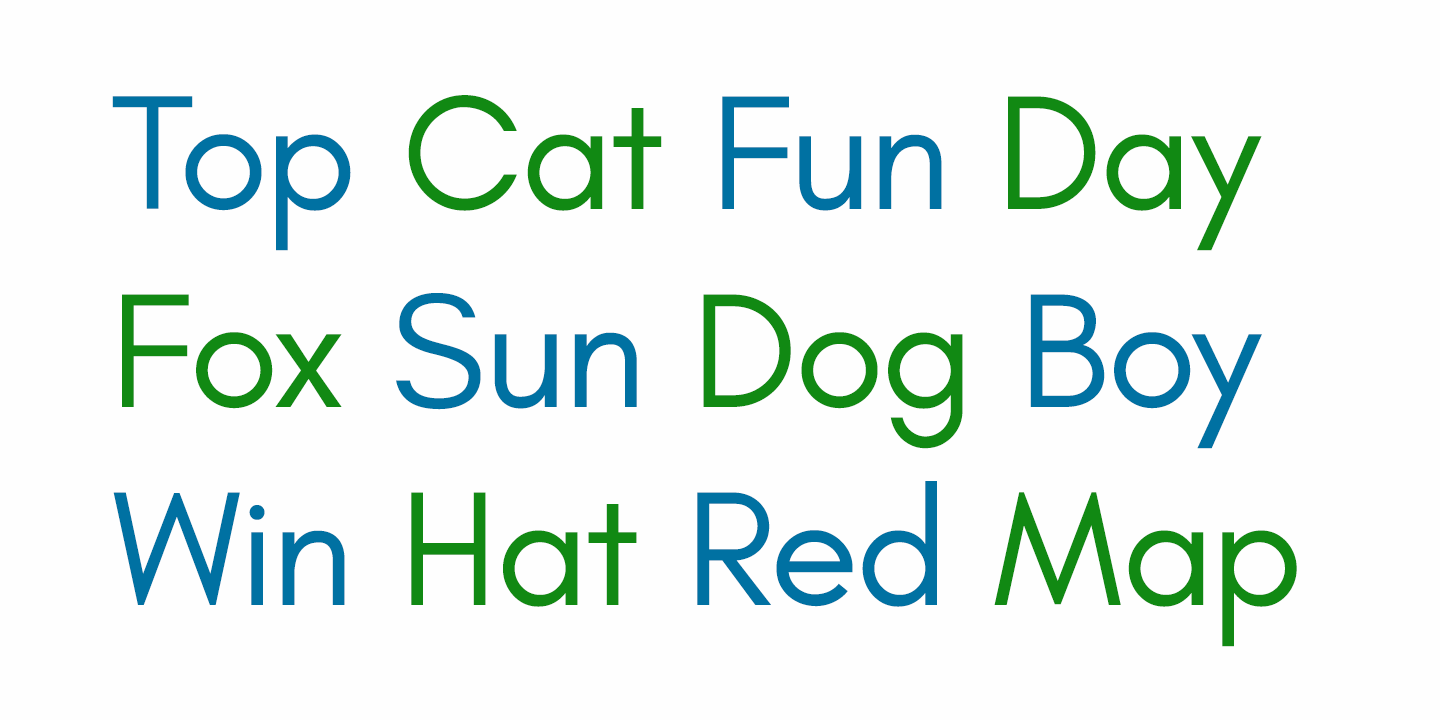
<style>
.page{position:relative;width:1440px;height:720px;background:#fefefe}
.page>*{position:absolute;margin:0}
.t1{font:165px "Teachers-Regular";color:#118913}
.t2{font:165px "Teachers-Regular";color:#0071a2}
</style>
<div class="page">
<p class="t1" style="left:112px;top:95px;width:1185px;height:552px"><span class="t2">Top </span>Cat <span class="t2">Fun </span>Day<br>Fox <span class="t2">Sun</span> Dog <span class="t2">Boy<br>Win </span>Hat <span class="t2">Red </span>Map</p>
</div>
